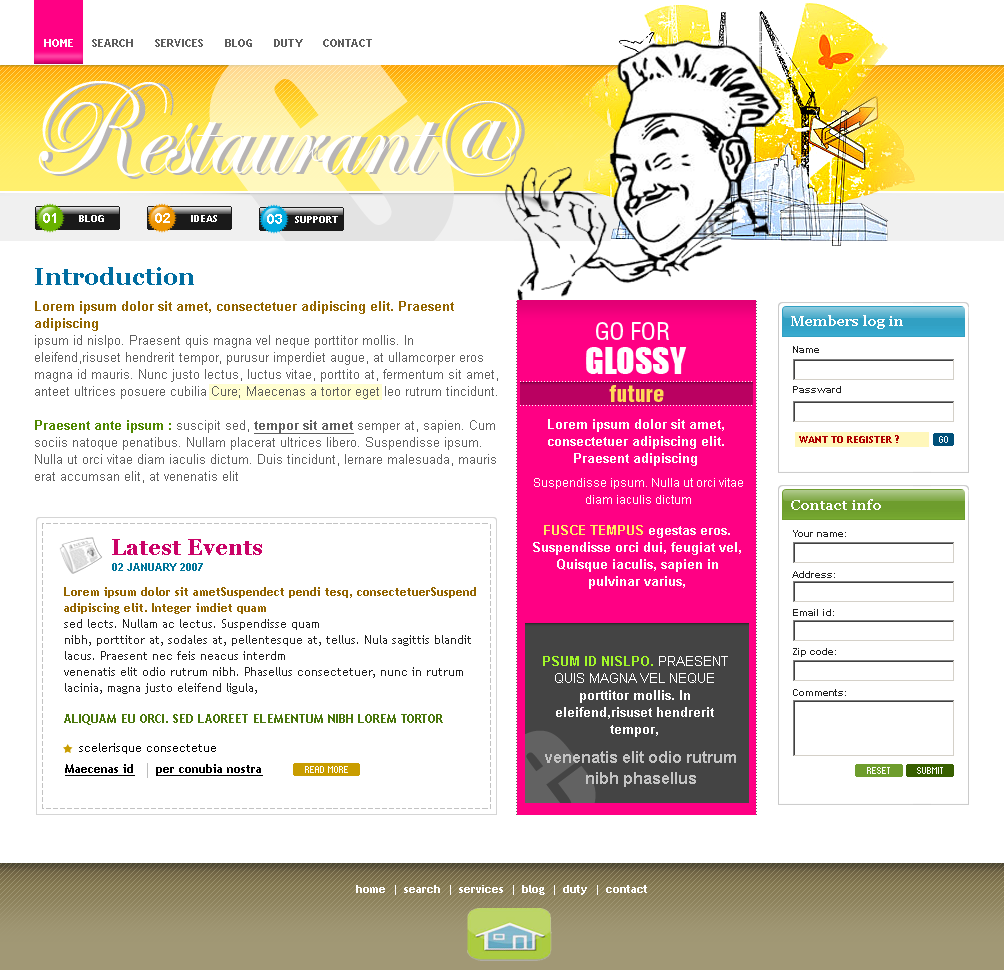
<style>
.page{position:relative;width:1004px;height:970px;background:#ffffff}
.page>*{position:absolute;margin:0}
.t1{font:11px "TrebuchetMS-Bold";color:#5d5d5d;text-transform:uppercase}
.t2{font:11px "TrebuchetMS-Bold";color:#ffffff;text-transform:uppercase}
.t3{font:135.9px "EdwardianScriptITC";color:#ffffff;scale:0.87 1}
.t4{font:137.5px "EdwardianScriptITC";color:#b8b5b5;scale:0.86 1}
.t5{font:14px "Arial-BoldMT";letter-spacing:-0.06em;color:#ffffff;text-transform:uppercase}
.t6{font:10px "TrebuchetMS-Bold";color:#ffffff;text-transform:uppercase}
.t7{font:24px "Georgia-Bold";color:#006da0}
.t8{font:13px/17px "ArialMT";color:#5f5f5f}
.t9{font:13px/17px "Arial-BoldMT";color:#946500}
.t10{font:13px/17px "Arial-BoldMT";color:#508800}
.t11{font:13px/17px "Arial-BoldMT";color:#5f5f5f;text-decoration:underline}
.t12{font:14px "Georgia-Bold";color:#ffffff}
.t13{font:24px "Helvetica-Condensed";color:#ffffff;text-transform:uppercase}
.t14{font:34px "Impact";color:#ffffff;text-transform:uppercase}
.t15{font:10px "Arial-BoldMT";color:#202020}
.t16{font:22px "Helvetica-Condensed-Black";color:#ffdb57}
.t17{font:13px/17px "Arial-BoldMT";color:#ffffff}
.t18{font:10px "TrebuchetMS-Bold";color:#ad0000;text-transform:uppercase}
.t19{font:8px "Standard0757";color:#ffffff;text-transform:uppercase}
.t20{font:12px/17px "ArialMT";color:#ffffff}
.t21{font:13px/17px "Arial-BoldMT";color:#ffec61;text-transform:uppercase}
.t22{font:22px "Georgia-Bold";color:#ca0267}
.t23{font:11px "TrebuchetMS-Bold";color:#00759a;text-transform:uppercase}
.t24{font:12px/16px "TrebuchetMS";color:#202020}
.t25{font:12px/16px "TrebuchetMS-Bold";color:#946500}
.t26{font:12px/15px "TrebuchetMS-Bold";color:#49760b;text-transform:uppercase}
.t27{font:13px/17px "Arial-BoldMT";color:#a3f82a;text-transform:uppercase}
.t28{font:13px/17px "ArialMT";color:#ffffff;text-transform:uppercase}
.t29{font:12px "TrebuchetMS";color:#000000}
.t30{font:16px/21px "Arial-BoldMT";color:#c4c4c4}
.t31{font:12px "TrebuchetMS-Bold";color:#000000;text-decoration:underline}
.t32{font:11px "TrebuchetMS-Bold";color:#ffffff}
</style>
<div class="page">
<p class="t1" style="left:44px;top:39px;width:328px;height:8px"><span class="t2">home</span>      search       services       blog       duty       contact</p>
<p class="t3" style="left:38px;top:81px;width:482px;height:95px">Restaurant@</p>
<p class="t4" style="left:43px;top:82px;width:482px;height:97px">Restaurant@</p>
<p class="t5" style="left:43px;top:213px;width:13px;height:10px">01</p>
<p class="t6" style="left:79px;top:215px;width:25px;height:7px">Blog</p>
<p class="t5" style="left:155px;top:213px;width:15px;height:10px">02</p>
<p class="t6" style="left:191px;top:215px;width:26px;height:7px">Ideas</p>
<p class="t5" style="left:267px;top:214px;width:15px;height:10px">03</p>
<p class="t6" style="left:295px;top:216px;width:43px;height:7px">Support</p>
<p class="t7" style="left:35px;top:267px;width:159px;height:18px">Introduction</p>
<p class="t8" style="left:35px;top:301px;width:463px;height:182px"><span class="t9">Lorem ipsum dolor sit amet, consectetuer adipiscing elit. Praesent adipiscing <br></span>ipsum id nislpo. Praesent quis magna vel neque porttitor mollis. In eleifend,risuset hendrerit tempor, purusur imperdiet augue, at ullamcorper eros magna id mauris. Nunc justo lectus, luctus vitae, porttito at, fermentum sit amet, anteet ultrices posuere cubilia Cure; Maecenas a tortor eget leo rutrum tincidunt. <br><span class="t10"><br>Praesent ante ipsum : </span>suscipit sed, <span class="t11">tempor sit amet</span> semper at, sapien. Cum sociis natoque penatibus. Nullam placerat ultrices libero. Suspendisse ipsum. Nulla ut orci vitae diam iaculis dictum. Duis tincidunt, lernare malesuada, mauris erat accumsan elit, at venenatis elit</p>
<p class="t12" style="left:791px;top:315px;width:112px;height:14px">Members log in</p>
<p class="t13" style="left:596px;top:322px;width:73px;height:18px">go for</p>
<p class="t14" style="left:586px;top:347px;width:101px;height:27px">glossy</p>
<p class="t15" style="left:793px;top:346px;width:26px;height:7px">Name</p>
<p class="t16" style="left:609px;top:385px;width:55px;height:17px">future</p>
<p class="t15" style="left:793px;top:386px;width:48px;height:7px">Passward</p>
<p class="t17" style="left:548px;top:419px;width:176px;height:47px;text-align:center">Lorem ipsum dolor sit amet, consectetuer adipiscing elit. Praesent adipiscing</p>
<p class="t18" style="left:799px;top:435px;width:100px;height:8px">want to register ?</p>
<p class="t19" style="left:939px;top:436px;width:9px;height:7px">go</p>
<p class="t20" style="left:534px;top:478px;width:209px;height:26px;text-align:center">Suspendisse ipsum. Nulla ut orci vitae diam iaculis dictum</p>
<p class="t12" style="left:791px;top:499px;width:90px;height:11px">Contact info</p>
<p class="t17" style="left:533px;top:525px;width:208px;height:64px;text-align:center"><span class="t21">Fusce tempus </span>egestas eros. Suspendisse orci dui, feugiat vel, Quisque iaculis, sapien in pulvinar varius,</p>
<p class="t15" style="left:793px;top:530px;width:53px;height:7px">Your name:</p>
<p class="t22" style="left:112px;top:539px;width:150px;height:16px">Latest Events</p>
<p class="t23" style="left:112px;top:563px;width:91px;height:8px">02 january 2007</p>
<p class="t15" style="left:792px;top:571px;width:43px;height:7px">Address:</p>
<p class="t24" style="left:64px;top:587px;width:412px;height:138px"><span class="t25">Lorem ipsum dolor sit ametSuspendect pendi tesq, consectetuerSuspend adipiscing elit. Integer imdiet quam <br></span>sed lects. Nullam ac lectus. Suspendisse quam <br>nibh, porttitor at, sodales at, pellentesque at, tellus. Nula sagittis blandit lacus. Praesent nec feis neacus interdm<br>venenatis elit odio rutrum nibh. Phasellus consectetuer, nunc in rutrum lacinia, magna justo eleifend ligula, <br><br><span class="t26">Aliquam eu orci. Sed laoreet elementum nibh lorem tortor</span></p>
<p class="t15" style="left:793px;top:609px;width:41px;height:7px">Email id:</p>
<p class="t15" style="left:793px;top:648px;width:43px;height:9px">Zip code:</p>
<p class="t17" style="left:543px;top:656px;width:185px;height:81px;text-align:center"><span class="t27">psum id nislpo. </span><span class="t28">Praesent quis magna vel neque <br></span>porttitor mollis. In eleifend,risuset hendrerit tempor,</p>
<p class="t15" style="left:793px;top:689px;width:53px;height:7px">Comments:</p>
<p class="t29" style="left:79px;top:743px;width:137px;height:11px">scelerisque consectetue</p>
<p class="t30" style="left:545px;top:751px;width:191px;height:36px;text-align:center">venenatis elit odio rutrum nibh phasellus</p>
<p class="t31" style="left:65px;top:764px;width:70px;height:12px">Maecenas id</p>
<p class="t31" style="left:156px;top:764px;width:107px;height:12px">per conubia nostra</p>
<p class="t19" style="left:305px;top:766px;width:43px;height:7px">read more</p>
<p class="t19" style="left:867px;top:767px;width:23px;height:7px">reset</p>
<p class="t19" style="left:917px;top:767px;width:26px;height:7px">submit</p>
<p class="t32" style="left:356px;top:885px;width:291px;height:10px">home  |  search  |  services  |  blog  |  duty  |  contact</p>
</div>
